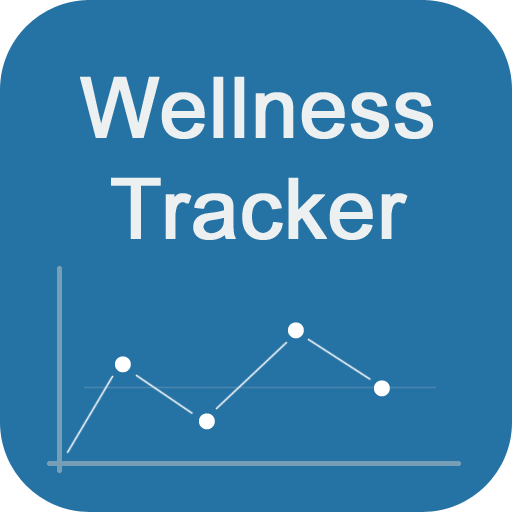
<style>
.page{position:relative;width:512px;height:512px;background:#2572a4}
.page>*{position:absolute;margin:0}
.t1{font:84px "ArialMT";color:#ffffff;font-weight:bold}
.t2{font:107px "Avenir-Roman";color:#ffffff;font-weight:bold}
</style>
<div class="page">
<p class="t1" style="left:80px;top:76px;width:353px;height:164px;text-align:center">Wellness<br>Tracker</p>
<p class="t2" style="left:288px;top:322px;width:16px;height:17px">.</p>
<p class="t2" style="left:115px;top:356px;width:16px;height:17px">.</p>
<p class="t2" style="left:374px;top:380px;width:16px;height:17px">.</p>
<p class="t2" style="left:199px;top:413px;width:16px;height:17px">.</p>
</div>
